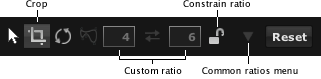
<style>
.page{position:relative;width:321px;height:79px;background:#ffffff}
.page>*{position:absolute;margin:0}
.t1{font:9px "LucidaGrande";color:#000000}
</style>
<div class="page">
<p class="t1" style="left:26px;top:0px;width:21px;height:9px">Crop</p>
<p class="t1" style="left:183px;top:0px;width:67px;height:7px">Constrain ratio</p>
<p class="t1" style="left:124px;top:67px;width:58px;height:7px">Custom ratio</p>
<p class="t1" style="left:202px;top:67px;width:96px;height:7px">Common ratios menu</p>
</div>
